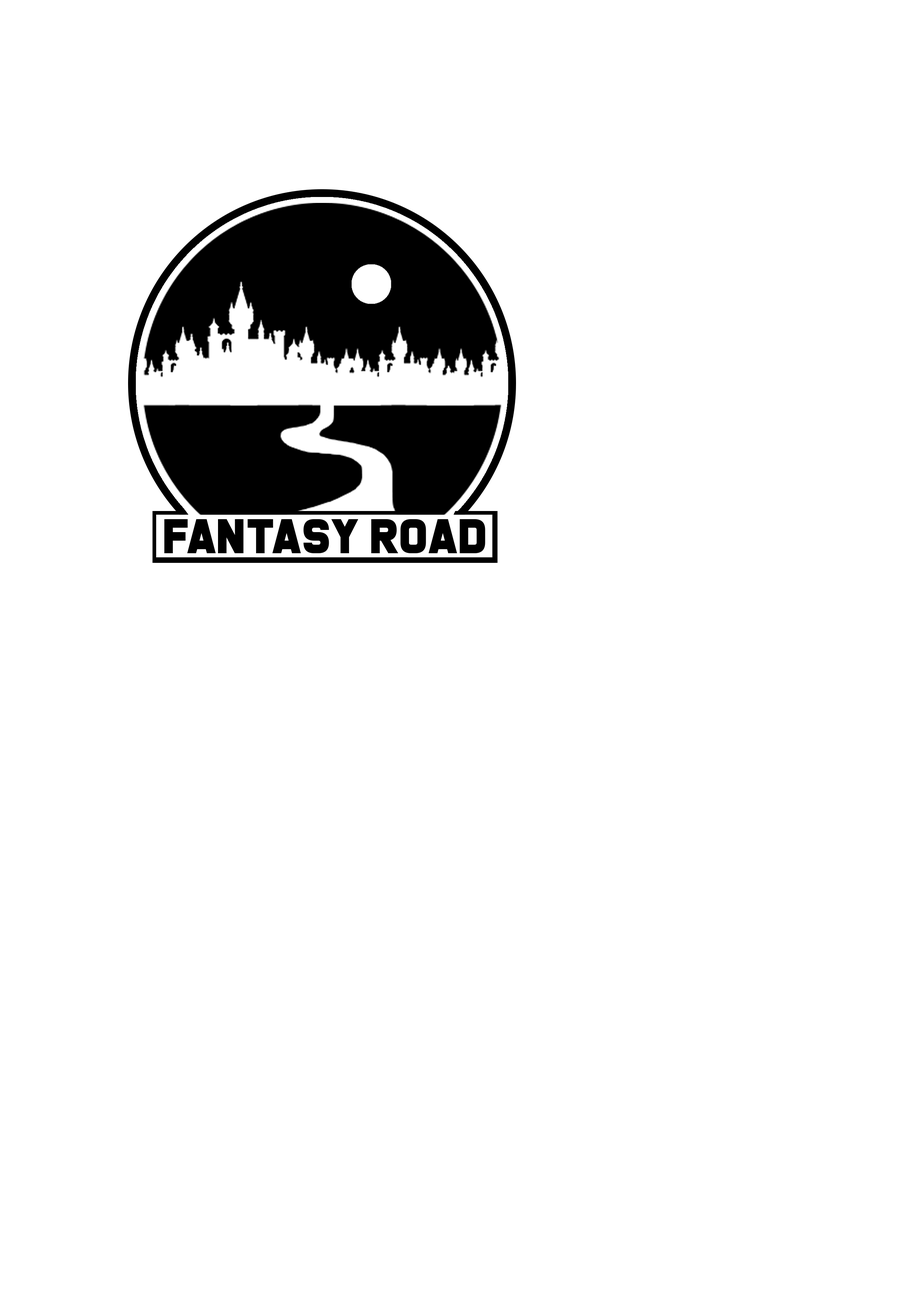
<style>
.page{position:relative;width:918px;height:1299px;background:#ffffff}
.page>*{position:absolute;margin:0}
.t1{font:43.2px "BoomerTantrum";color:#000000}
</style>
<div class="page">
<p class="t1" style="left:164px;top:519px;width:321px;height:34px">fantasy road</p>
</div>
